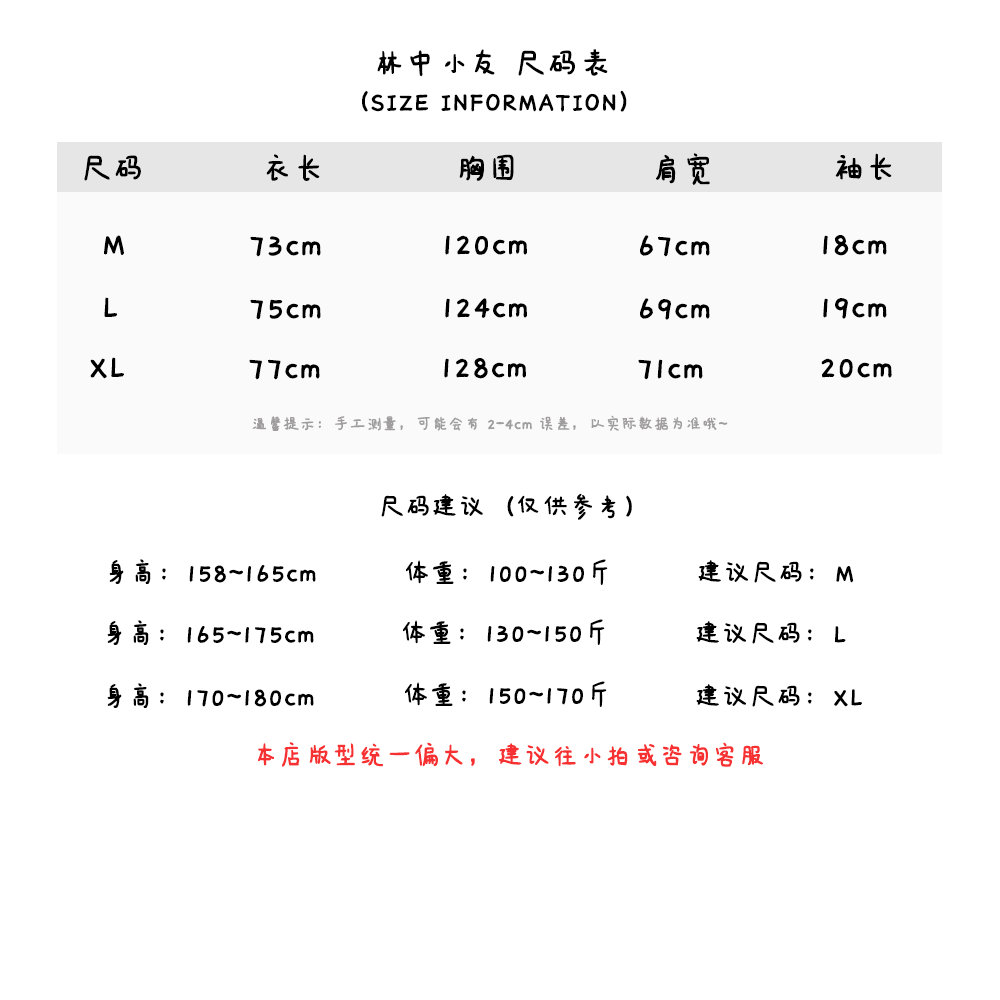
<style>
.page{position:relative;width:1000px;height:1000px;background:#ffffff}
.page>*{position:absolute;margin:0}
.t1{font:36px "IdeaFonts-QianXiaTi";color:#000000;font-weight:bold}
.t2{font:30px "IdeaFonts-QianXiaTi";color:#000000;font-weight:bold}
.t3{font:18px "IdeaFonts-QianXiaTi";color:#9f9d9d;font-weight:bold}
.t4{font:30px "IdeaFonts-QianXiaTi";color:#f73131;font-weight:bold}
</style>
<div class="page">
<p class="t1" style="left:377px;top:49px;width:231px;height:28px">林中小友 尺码表</p>
<p class="t2" style="left:362px;top:90px;width:265px;height:22px">（SIZE INFORMATION）</p>
<p class="t1" style="left:84px;top:155px;width:57px;height:26px">尺码</p>
<p class="t1" style="left:266px;top:154px;width:54px;height:27px">衣长</p>
<p class="t1" style="left:459px;top:154px;width:55px;height:27px">胸围</p>
<p class="t1" style="left:656px;top:153px;width:54px;height:32px">肩宽</p>
<p class="t1" style="left:835px;top:153px;width:57px;height:27px">袖长</p>
<p class="t1" style="left:104px;top:235px;width:20px;height:20px">M</p>
<p class="t1" style="left:250px;top:236px;width:71px;height:21px">73cm</p>
<p class="t1" style="left:445px;top:235px;width:82px;height:20px">120cm</p>
<p class="t1" style="left:640px;top:235px;width:70px;height:22px">67cm</p>
<p class="t1" style="left:823px;top:235px;width:64px;height:21px">18cm</p>
<p class="t1" style="left:104px;top:297px;width:14px;height:20px">L</p>
<p class="t1" style="left:250px;top:299px;width:71px;height:21px">75cm</p>
<p class="t1" style="left:445px;top:298px;width:82px;height:20px">124cm</p>
<p class="t1" style="left:640px;top:298px;width:70px;height:22px">69cm</p>
<p class="t1" style="left:823px;top:298px;width:64px;height:21px">19cm</p>
<p class="t1" style="left:90px;top:357px;width:34px;height:22px">XL</p>
<p class="t1" style="left:249px;top:359px;width:71px;height:21px">77cm</p>
<p class="t1" style="left:444px;top:358px;width:82px;height:21px">128cm</p>
<p class="t1" style="left:638px;top:359px;width:65px;height:21px">71cm</p>
<p class="t1" style="left:821px;top:358px;width:71px;height:20px">20cm</p>
<p class="t3" style="left:252px;top:415px;width:476px;height:16px">温馨提示：手工测量，可能会有 2-4cm 误差，以实际数据为准哦~</p>
<p class="t2" style="left:381px;top:493px;width:251px;height:27px">尺码建议（仅供参考）</p>
<p class="t2" style="left:109px;top:559px;width:207px;height:25px">身高：158~165cm</p>
<p class="t2" style="left:406px;top:559px;width:202px;height:26px">体重：100~130斤</p>
<p class="t2" style="left:698px;top:560px;width:156px;height:23px">建议尺码：M</p>
<p class="t2" style="left:107px;top:620px;width:207px;height:25px">身高：165~175cm</p>
<p class="t2" style="left:403px;top:619px;width:202px;height:26px">体重：130~150斤</p>
<p class="t2" style="left:696px;top:621px;width:150px;height:23px">建议尺码：L</p>
<p class="t2" style="left:107px;top:683px;width:207px;height:25px">身高：170~180cm</p>
<p class="t2" style="left:405px;top:681px;width:202px;height:26px">体重：150~170斤</p>
<p class="t2" style="left:696px;top:684px;width:166px;height:23px">建议尺码：XL</p>
<p class="t4" style="left:258px;top:742px;width:505px;height:25px">本店版型统一偏大，建议往小拍或咨询客服</p>
</div>
